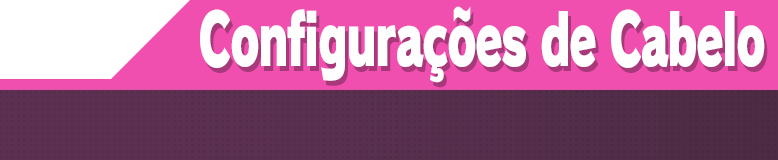
<style>
.page{position:relative;width:778px;height:160px;background:#f14faf}
.page>*{position:absolute;margin:0}
.t1{font:70.7px "RodinPro-UB";letter-spacing:-0.035em;color:#fffeff;scale:0.63 1}
</style>
<div class="page">
<p class="t1" style="left:200px;top:6px;width:565px;height:77px">Configurações de Cabelo</p>
</div>
